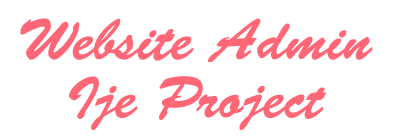
<style>
.page{position:relative;width:394px;height:140px;background:#ffffff}
.page>*{position:absolute;margin:0}
.t1{font:58.3px/58.3px "BrushScriptStd";color:#ff6777}
</style>
<div class="page">
<p class="t1" style="left:20px;top:18px;width:353px;height:112px;text-align:center">Website Admin<br>Ije Project</p>
</div>
